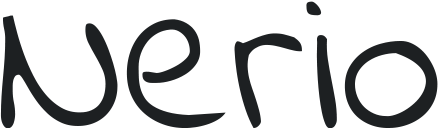
<style>
.page{position:relative;width:438px;height:128px;background:#ffffff}
.page>*{position:absolute;margin:0}
.t1{font:210px "IndieFlower";color:#1d2022}
</style>
<div class="page">
<p class="t1" style="left:0px;top:1px;width:438px;height:128px">Nerio</p>
</div>
